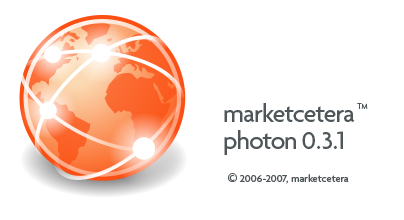
<style>
.page{position:relative;width:404px;height:220px;background:#ffffff}
.page>*{position:absolute;margin:0}
.t1{font:26.7px "Agenda-Medium";letter-spacing:-0.04em;color:#4e5659}
.t2{font:26.7px "Agenda-Medium";letter-spacing:-0.01em;color:#4e5659}
.t3{font:26.7px "Agenda-Medium";color:#4e5659}
.t4{font:8px "Agenda-Light";color:#4e5659}
.t5{font:10.7px "Agenda-Medium";color:#4e5659}
.t6{font:18.7px "Agenda-Medium";color:#4e5659}
</style>
<div class="page">
<p class="t1" style="left:224px;top:103px;width:131px;height:52px">marketcetera<br>photon <span class="t2">0.</span><span class="t3">3.1</span></p>
<p class="t4" style="left:357px;top:103px;width:11px;height:6px">TM</p>
<p class="t5" style="left:228px;top:173px;width:121px;height:11px"><span class="t6">©</span> 2006-2007, marketcetera llc</p>
</div>
